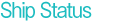
<style>
.page{position:relative;width:129px;height:21px;background:#ffffff}
.page>*{position:absolute;margin:0}
.t1{font:20px "GothicMB101Pro-Regular";letter-spacing:-0.06em;color:#1dbcc0;scale:0.9 1}
</style>
<div class="page">
<p class="t1" style="left:0px;top:1px;width:92px;height:20px">Ship Status</p>
</div>
